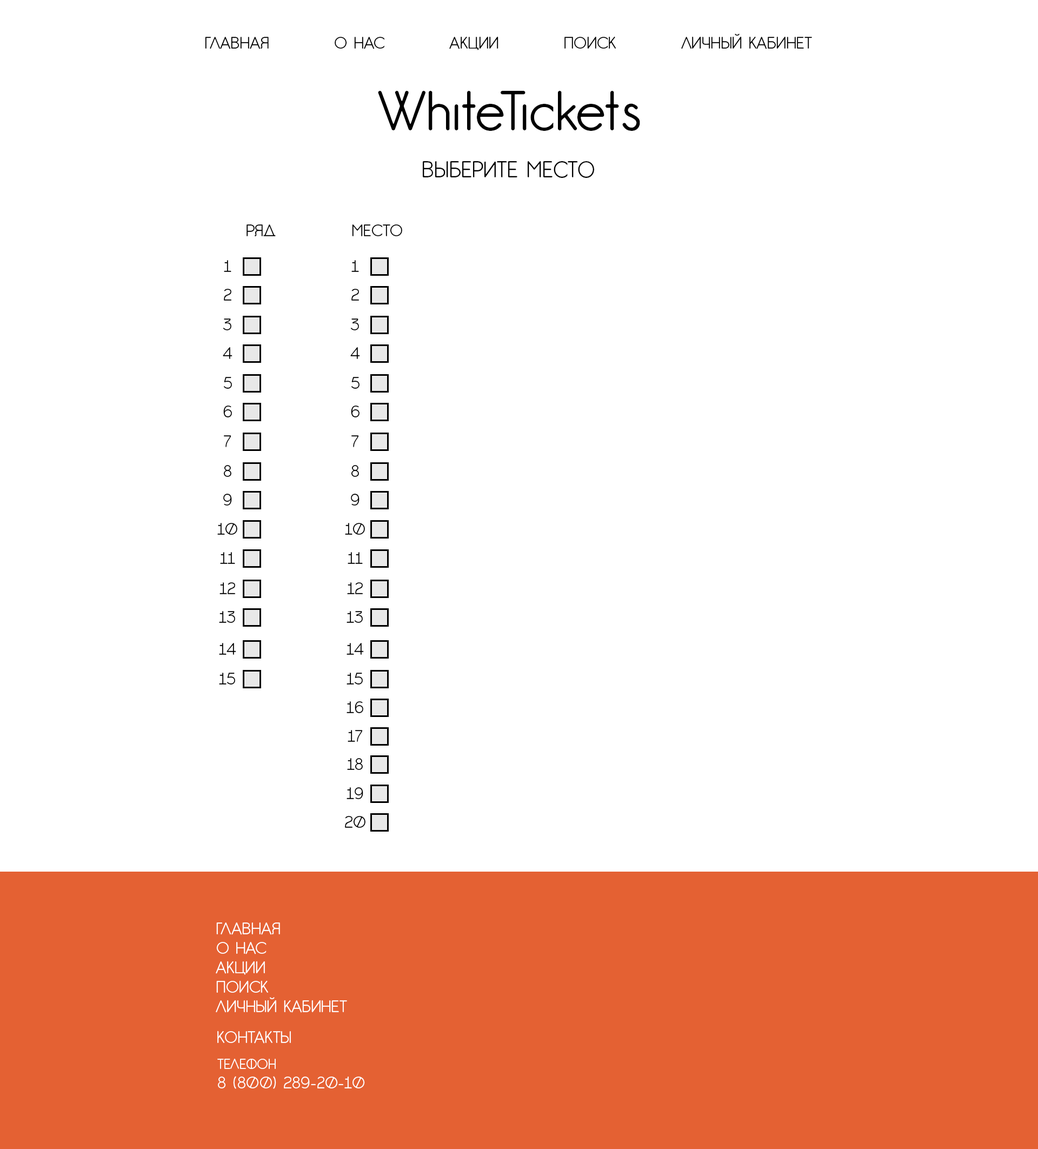
<style>
.page{position:relative;width:1038px;height:1149px;background:#ffffff}
.page>*{position:absolute;margin:0}
.t1{font:16.2px "GardensC";color:#000000}
.t2{font:54.1px "GardensC";color:#000000}
.t3{font:21.6px "GardensC";color:#000000}
.t4{font:16.2px "GardensC";color:#ffffff}
.t5{font:13.5px "GardensC";color:#ffffff}
</style>
<div class="page">
<p class="t1" style="left:205px;top:34px;width:607px;height:16px">ГЛАВНАЯ          О НАС          АКЦИИ          ПОИСК          ЛИЧНЫЙ КАБИНЕТ</p>
<p class="t2" style="left:378px;top:91px;width:262px;height:40px">WhiteTickets</p>
<p class="t3" style="left:423px;top:161px;width:171px;height:17px">ВЫБЕРИТЕ МЕСТО</p>
<p class="t1" style="left:247px;top:224px;width:29px;height:12px">РЯД</p>
<p class="t1" style="left:352px;top:224px;width:50px;height:12px">МЕСТО</p>
<p class="t1" style="left:224px;top:260px;width:7px;height:12px">1</p>
<p class="t1" style="left:351px;top:260px;width:8px;height:12px">1</p>
<p class="t1" style="left:224px;top:289px;width:8px;height:12px">2</p>
<p class="t1" style="left:351px;top:289px;width:9px;height:12px">2</p>
<p class="t1" style="left:223px;top:318px;width:8px;height:12px">3</p>
<p class="t1" style="left:350px;top:318px;width:9px;height:12px">3</p>
<p class="t1" style="left:223px;top:347px;width:9px;height:12px">4</p>
<p class="t1" style="left:350px;top:347px;width:10px;height:12px">4</p>
<p class="t1" style="left:224px;top:377px;width:8px;height:12px">5</p>
<p class="t1" style="left:351px;top:377px;width:9px;height:12px">5</p>
<p class="t1" style="left:223px;top:405px;width:9px;height:12px">6</p>
<p class="t1" style="left:351px;top:405px;width:9px;height:12px">6</p>
<p class="t1" style="left:223px;top:435px;width:8px;height:12px">7</p>
<p class="t1" style="left:351px;top:435px;width:8px;height:12px">7</p>
<p class="t1" style="left:223px;top:465px;width:8px;height:12px">8</p>
<p class="t1" style="left:351px;top:465px;width:8px;height:12px">8</p>
<p class="t1" style="left:223px;top:494px;width:9px;height:11px">9</p>
<p class="t1" style="left:351px;top:494px;width:9px;height:11px">9</p>
<p class="t1" style="left:217px;top:523px;width:20px;height:12px">10</p>
<p class="t1" style="left:345px;top:523px;width:20px;height:12px">10</p>
<p class="t1" style="left:220px;top:552px;width:15px;height:12px">11</p>
<p class="t1" style="left:348px;top:552px;width:15px;height:12px">11</p>
<p class="t1" style="left:219px;top:582px;width:17px;height:12px">12</p>
<p class="t1" style="left:347px;top:582px;width:16px;height:12px">12</p>
<p class="t1" style="left:219px;top:611px;width:16px;height:12px">13</p>
<p class="t1" style="left:347px;top:611px;width:16px;height:12px">13</p>
<p class="t1" style="left:219px;top:643px;width:17px;height:12px">14</p>
<p class="t1" style="left:347px;top:643px;width:17px;height:12px">14</p>
<p class="t1" style="left:219px;top:673px;width:16px;height:11px">15</p>
<p class="t1" style="left:347px;top:673px;width:16px;height:11px">15</p>
<p class="t1" style="left:347px;top:701px;width:16px;height:12px">16</p>
<p class="t1" style="left:348px;top:730px;width:15px;height:12px">17</p>
<p class="t1" style="left:347px;top:758px;width:16px;height:12px">18</p>
<p class="t1" style="left:347px;top:787px;width:16px;height:12px">19</p>
<p class="t1" style="left:345px;top:816px;width:20px;height:12px">20</p>
<p class="t4" style="left:216px;top:922px;width:131px;height:91px">ГЛАВНАЯ<br>О НАС<br>АКЦИИ<br>ПОИСК<br>ЛИЧНЫЙ КАБИНЕТ</p>
<p class="t4" style="left:217px;top:1030px;width:74px;height:13px">КОНТАКТЫ</p>
<p class="t4" style="left:217px;top:1059px;width:148px;height:30px"><span class="t5">ТЕЛЕФОН<br></span>8 (800) 289-20-10</p>
</div>
